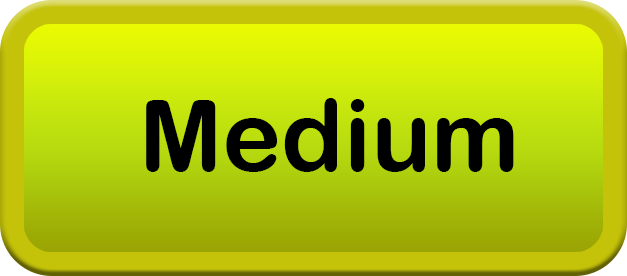
<style>
.page{position:relative;width:627px;height:276px}
.page>*{position:absolute;margin:0}
.t1{font:100px "ArialRoundedMTBold";color:#000000}
</style>
<div class="page">
<p class="t1" style="left:146px;top:98px;width:368px;height:74px">Medium</p>
</div>
